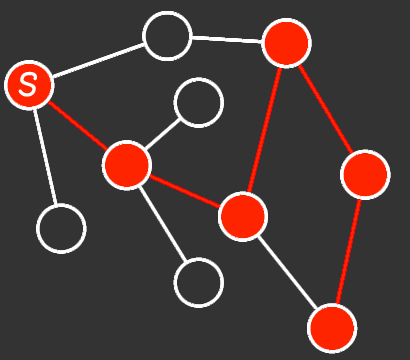
<style>
.page{position:relative;width:410px;height:360px;background:#333333}
.page>*{position:absolute;margin:0}
.t1{font:24px "Blokletters-Viltstift";color:#ffffff}
</style>
<div class="page">
<p class="t1" style="left:18px;top:71px;width:20px;height:26px">S</p>
</div>
